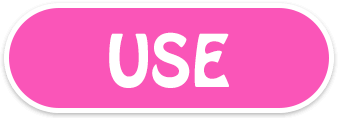
<style>
.page{position:relative;width:338px;height:118px;background:#fa55b8}
.page>*{position:absolute;margin:0}
.t1{font:64px "HoboStd";color:#ffffff}
</style>
<div class="page">
<p class="t1" style="left:109px;top:32px;width:120px;height:56px">USE</p>
</div>
